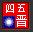
<style>
.page{position:relative;width:33px;height:32px;background:#f20000}
.page>*{position:absolute;margin:0}
.t1{font:10.4px "SimSun";color:#ffffff}
.t2{font:11.7px "SimSun";color:#ffffff}
</style>
<div class="page">
<p class="t1" style="left:6px;top:4px;width:19px;height:9px">四五</p>
<p class="t2" style="left:16px;top:15px;width:11px;height:12px">晋</p>
</div>
